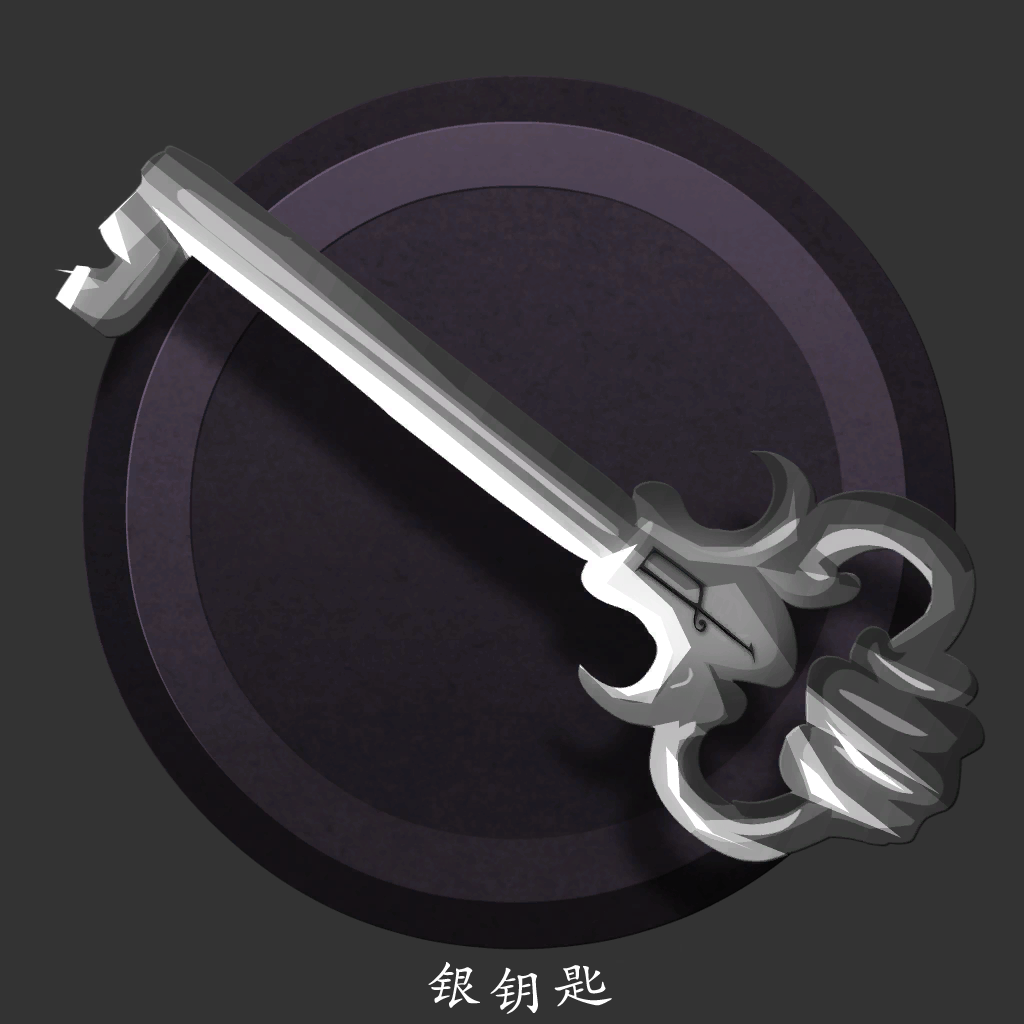
<style>
.page{position:relative;width:1024px;height:1024px;background:#333333}
.page>*{position:absolute;margin:0}
.t1{font:53.3px "STKaiti";letter-spacing:0.1em;color:#ffffff}
</style>
<div class="page">
<p class="t1" style="left:428px;top:962px;width:184px;height:52px">银钥匙</p>
</div>
